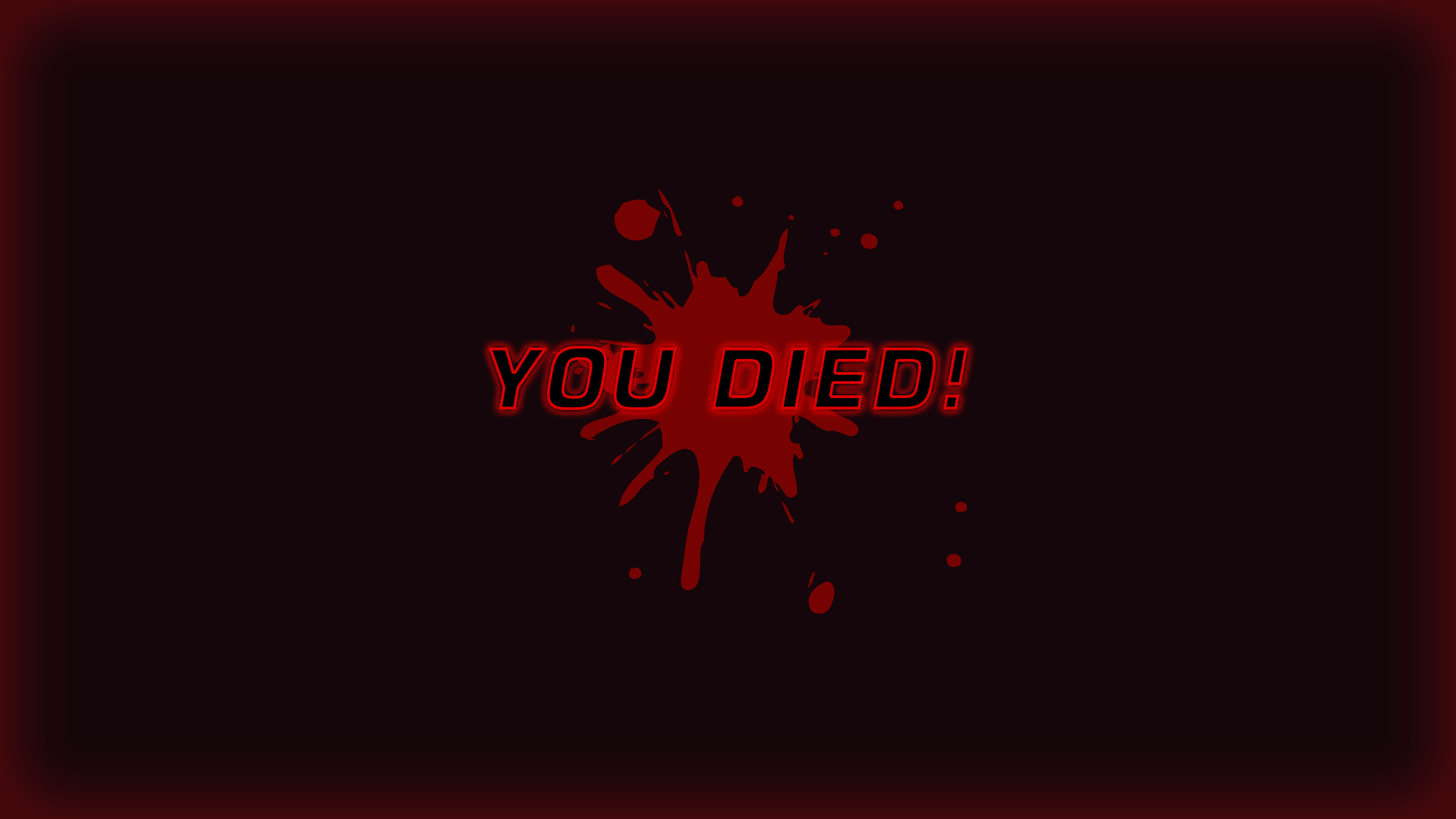
<style>
.page{position:relative;width:1456px;height:819px;background:#14060a}
.page>*{position:absolute;margin:0}
.t1{font:85.3px "Square721BT-Bold";letter-spacing:0.025em;font-style:italic}
</style>
<div class="page">
<p class="t1" style="left:488px;top:346px;width:480px;height:64px">YOU DIED!</p>
</div>
